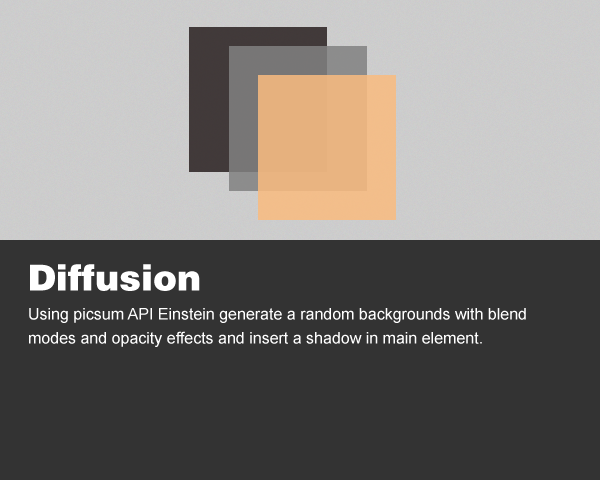
<style>
.page{position:relative;width:600px;height:480px;background:#333333}
.page>*{position:absolute;margin:0}
.t1{font:36px "HelveticaLTStd-Blk";color:#ffffff}
.t2{font:16px/24px "ArialMT";color:#ffffff}
</style>
<div class="page">
<p class="t1" style="left:30px;top:264px;width:170px;height:27px">Diffusion</p>
<p class="t2" style="left:29px;top:308px;width:497px;height:39px">Using picsum API Einstein generate a random backgrounds with blend modes and opacity effects and insert a shadow in main element.</p>
</div>
